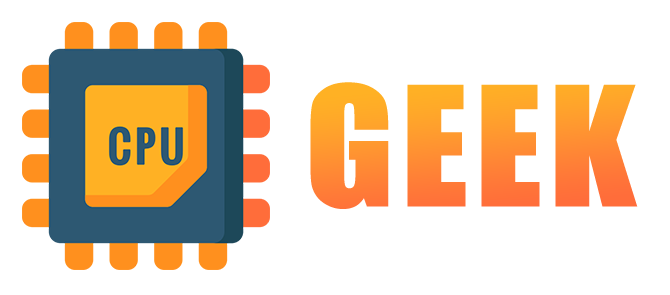
<style>
.page{position:relative;width:670px;height:295px;background:#ffffff}
.page>*{position:absolute;margin:0}
.t1{font:153.8px "Impact";letter-spacing:0.04em;scale:1.06 1}
</style>
<div class="page">
<p class="t1" style="left:310px;top:82px;width:328px;height:127px">GEEK</p>
</div>
